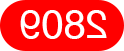
<style>
.page{position:relative;width:124px;height:51px;background:#ff0000}
.page>*{position:absolute;margin:0}
.t1{font:40px "Helvetica";color:#ffffff}
</style>
<div class="page">
<p class="t1" style="left:20px;top:10px;width:87px;height:29px;rotate:180deg">2809</p>
</div>
